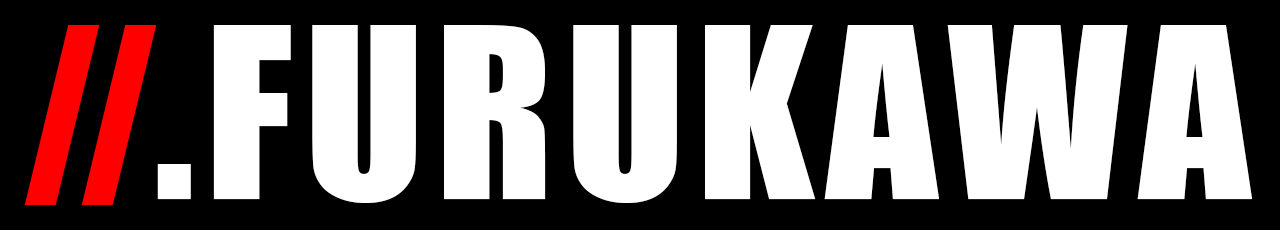
<style>
.page{position:relative;width:1280px;height:230px;background:#000000}
.page>*{position:absolute;margin:0}
.t1{font:220.1px "Impact";letter-spacing:0.05em;color:#ffffff}
</style>
<div class="page">
<p class="t1" style="left:157px;top:25px;width:1096px;height:178px">.FURUKAWA</p>
</div>
